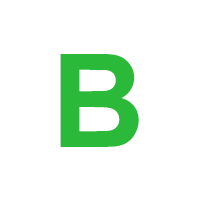
<style>
.page{position:relative;width:200px;height:200px;background:#ffffff}
.page>*{position:absolute;margin:0}
.t1{font:130px "Arial-BoldMT";letter-spacing:0.09em;color:#2ab939}
</style>
<div class="page">
<p class="t1" style="left:60px;top:54px;width:79px;height:93px">B</p>
</div>
